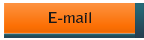
<style>
.page{position:relative;width:144px;height:40px}
.page>*{position:absolute;margin:0}
.t1{font:13.9px "BellGothicStd-Bold";color:#181818;scale:1.15 1}
</style>
<div class="page">
<p class="t1" style="left:49px;top:12px;width:42px;height:11px">E-mail</p>
</div>
